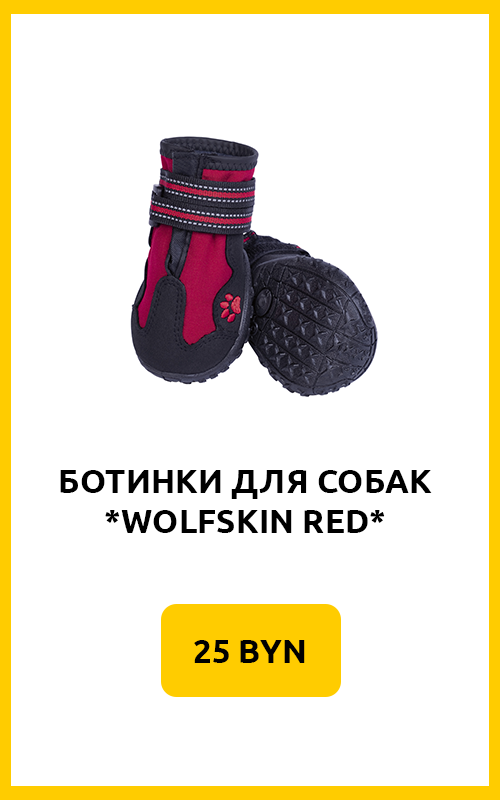
<style>
.page{position:relative;width:500px;height:800px;background:#ffffff}
.page>*{position:absolute;margin:0}
.t1{font:33.3px "Ubuntu-Bold";color:#000000}
</style>
<div class="page">
<p class="t1" style="left:60px;top:470px;width:372px;height:63px;text-align:center">БОТИНКИ ДЛЯ СОБАК<br>*WOLFSKIN RED*</p>
<p class="t1" style="left:194px;top:640px;width:111px;height:23px">25 BYN</p>
</div>
